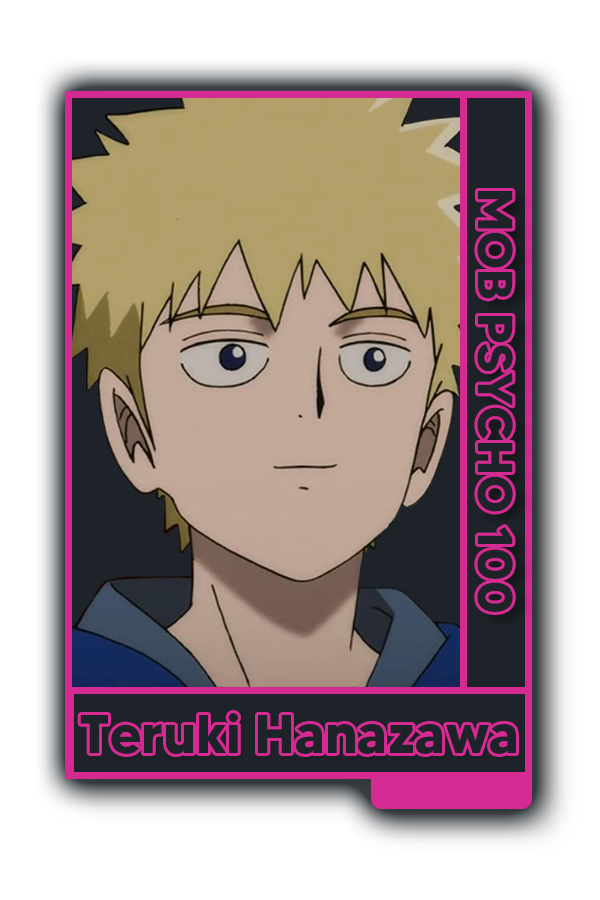
<style>
.page{position:relative;width:600px;height:900px;background:#ffffff}
.page>*{position:absolute;margin:0}
.t1{font:48.8px "MADETOMMY-Bold";color:#1d2328}
.t2{font:54.6px "MADETOMMY-Bold";color:#1d2328}
</style>
<div class="page">
<p class="t1" style="left:477px;top:191px;width:36px;height:421px;rotate:90deg">MOB PSYCHO 100</p>
<p class="t2" style="left:80px;top:713px;width:436px;height:41px">Teruki Hanazawa</p>
</div>
